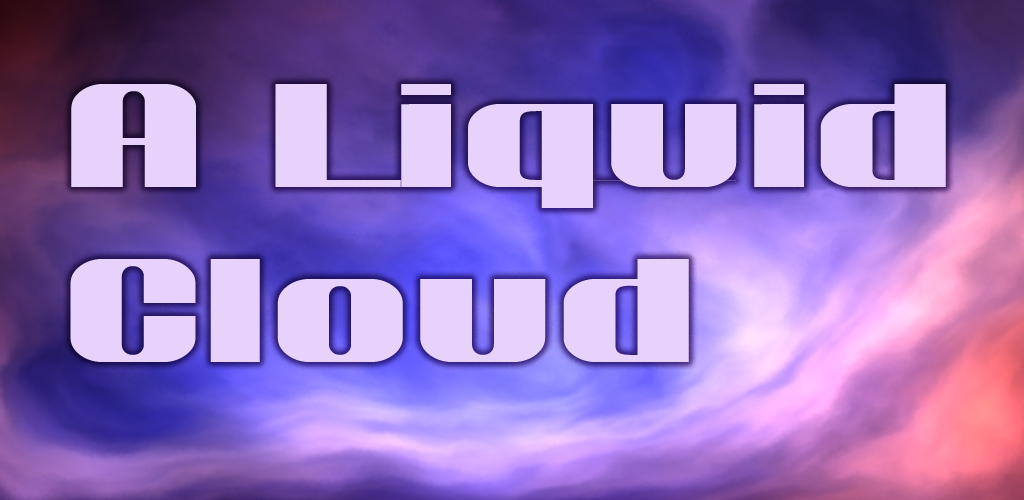
<style>
.page{position:relative;width:1024px;height:500px}
.page>*{position:absolute;margin:0}
.t1{font:145.8px "Ptarmigan";color:#e7d2fc;scale:1.37 1}
</style>
<div class="page">
<p class="t1" style="left:70px;top:84px;width:876px;height:278px">A Liquid Cloud</p>
</div>
